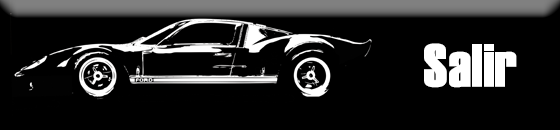
<style>
.page{position:relative;width:560px;height:130px;background:#000000}
.page>*{position:absolute;margin:0}
.t1{font:60px "Haettenschweiler";color:#ffffff;font-weight:bold}
</style>
<div class="page">
<p class="t1" style="left:424px;top:43px;width:93px;height:45px">Salir</p>
</div>
